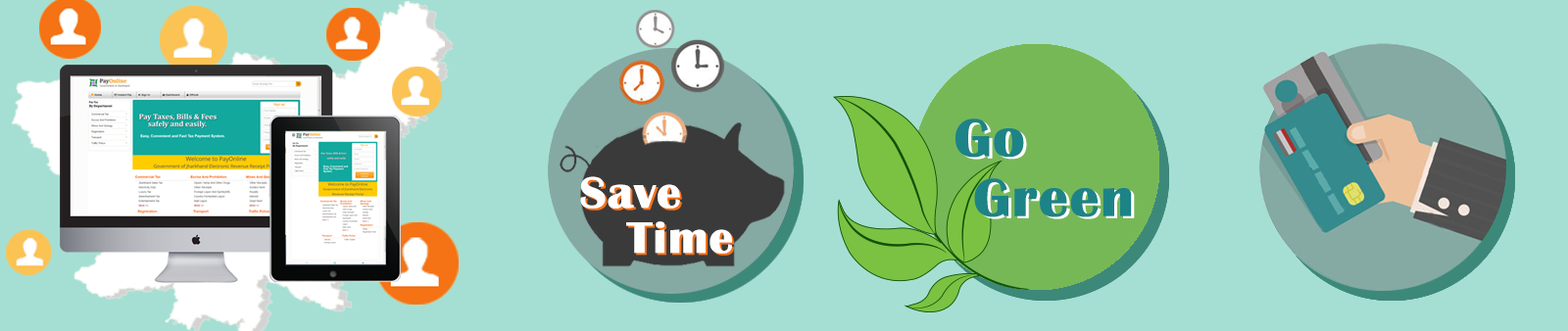
<style>
.page{position:relative;width:1568px;height:331px;background:#a5dfd3}
.page>*{position:absolute;margin:0}
.t1{font:54.9px/59.8px "BritannicBold";color:#1c8387;font-weight:bold;scale:1.07 1}
.t2{font:54.9px/59.8px "BritannicBold";font-weight:bold;scale:1.07 1}
.t3{font:45.1px/45.1px "BritannicBold";color:#ffffff;font-weight:bold;scale:1.07 1}
.t4{font:45.1px/45.1px "BritannicBold";font-weight:bold;scale:1.07 1}
</style>
<div class="page">
<p class="t1" style="left:955px;top:119px;width:177px;height:99px">Go <br>  Green</p>
<p class="t2" style="left:957px;top:121px;width:178px;height:99px">Go <br>  Green</p>
<p class="t3" style="left:580px;top:176px;width:152px;height:78px">Save <br>   Time</p>
<p class="t4" style="left:582px;top:178px;width:152px;height:78px">Save <br>   Time</p>
</div>
